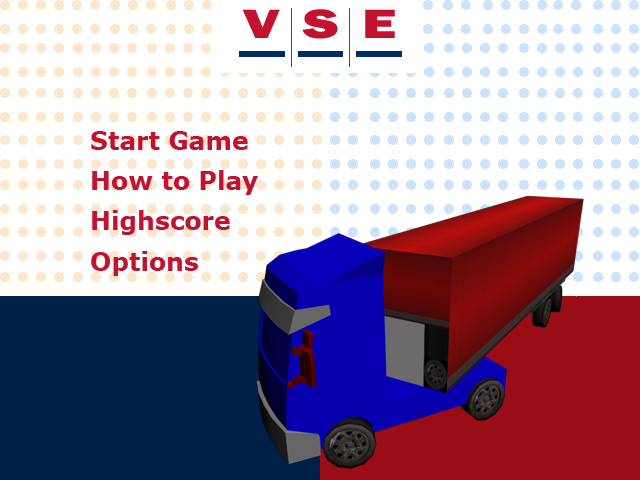
<style>
.page{position:relative;width:640px;height:480px;background:#ffffff}
.page>*{position:absolute;margin:0}
.t1{font:25px "Verdana-Bold";color:#c41230}
</style>
<div class="page">
<p class="t1" style="left:91px;top:131px;width:157px;height:19px">Start Game</p>
<p class="t1" style="left:92px;top:170px;width:166px;height:25px">How to Play</p>
<p class="t1" style="left:92px;top:210px;width:138px;height:25px">Highscore</p>
<p class="t1" style="left:91px;top:251px;width:107px;height:25px">Options</p>
</div>
